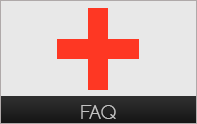
<style>
.page{position:relative;width:197px;height:124px;background:#e8e8e8}
.page>*{position:absolute;margin:0}
.t1{font:18px "Comfortaa-Light";color:#c3c3c3}
</style>
<div class="page">
<p class="t1" style="left:81px;top:105px;width:35px;height:14px">FAQ</p>
</div>
